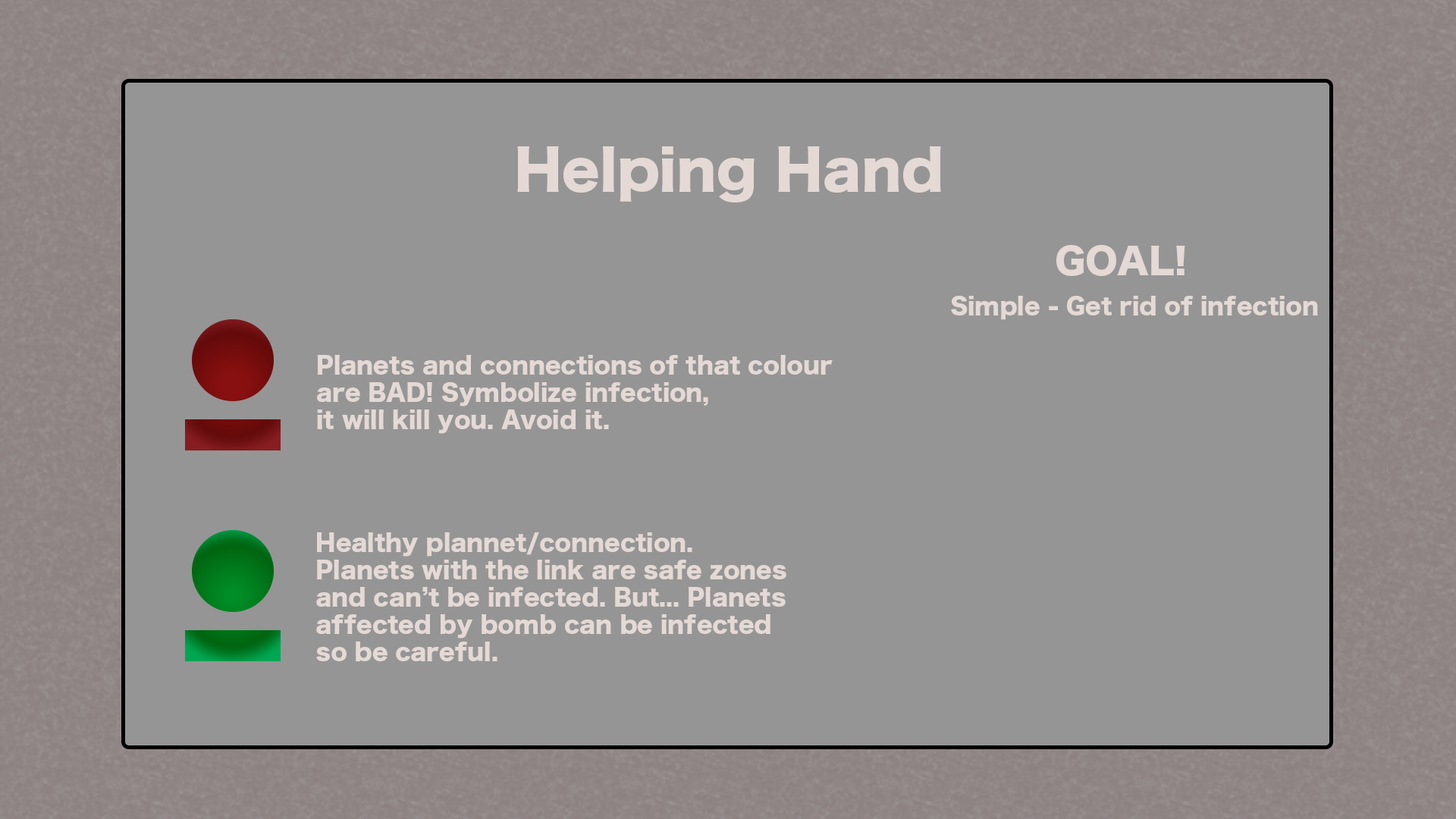
<style>
.page{position:relative;width:1456px;height:819px;background:#959595}
.page>*{position:absolute;margin:0}
.t1{font:54.6px "HiraKakuStd-W8";color:#e4d9d5}
.t2{font:36.4px "HiraKakuStd-W8";color:#e4d9d5}
.t3{font:22.7px "HiraKakuStd-W8";color:#e4d9d5}
</style>
<div class="page">
<p class="t1" style="left:517px;top:146px;width:424px;height:56px">Helping Hand</p>
<p class="t2" style="left:1056px;top:245px;width:129px;height:31px">GOAL!</p>
<p class="t3" style="left:951px;top:296px;width:367px;height:24px">Simple - Get rid of infection</p>
<p class="t3" style="left:317px;top:355px;width:516px;height:79px">Planets and connections of that colour<br>are BAD! Symbolize infection, <br>it will kill you. Avoid it.</p>
<p class="t3" style="left:316px;top:532px;width:470px;height:129px">Healthy plannet/connection.<br>Planets with the link are safe zones<br>and can’t be infected. But... Planets<br>affected by bomb can be infected<br>so be careful.</p>
</div>
